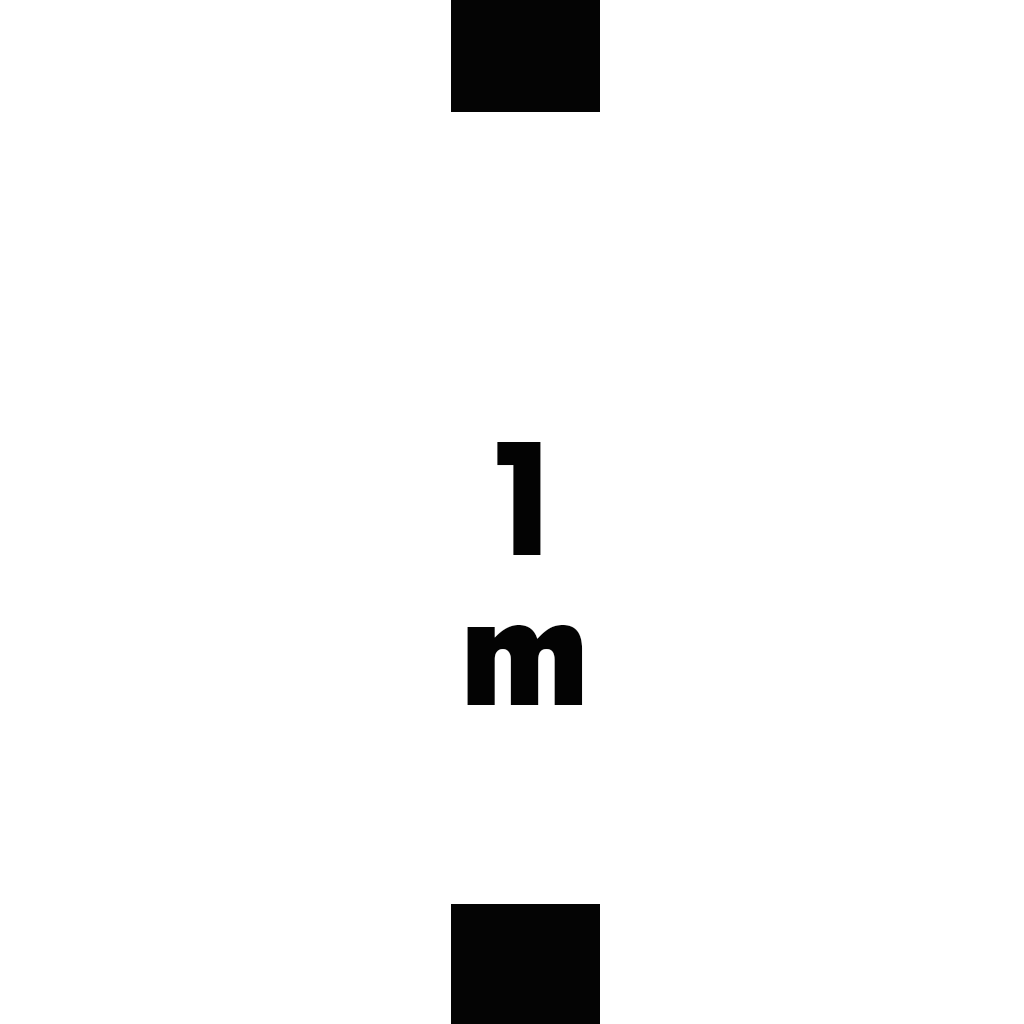
<style>
.page{position:relative;width:1024px;height:1024px;background:#ffffff}
.page>*{position:absolute;margin:0}
.t1{font:172.8px/150px "TwCenMT-CondensedExtraBold";color:#030303;scale:1.12 1}
</style>
<div class="page">
<p class="t1" style="left:467px;top:442px;width:116px;height:263px;text-align:center">1<br>m</p>
</div>
